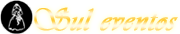
<style>
.page{position:relative;width:180px;height:34px;background:#ffffff}
.page>*{position:absolute;margin:0}
.t1{font:32.1px "Vivaldi";letter-spacing:0.02em;font-weight:bold}
</style>
<div class="page">
<p class="t1" style="left:34px;top:7px;width:144px;height:24px">Sul eventos</p>
</div>
